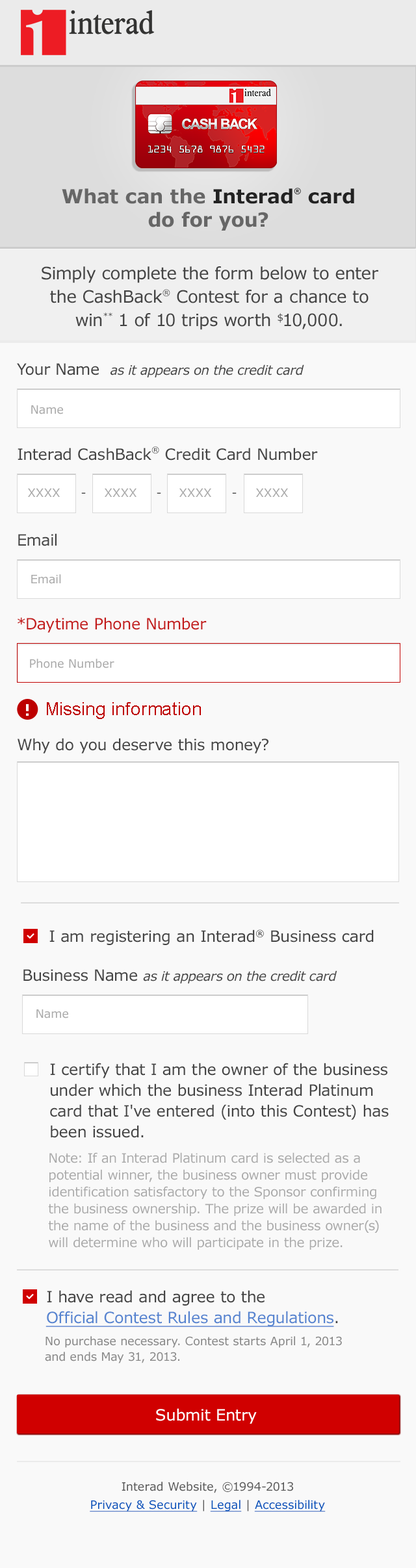
<style>
.page{position:relative;width:416px;height:1568px;background:#f9f9f9}
.page>*{position:absolute;margin:0}
.t1{font:19.5px/23.4px "Verdana-Bold";color:#666666}
.t2{font:19.5px/23.4px "Verdana-Bold";color:#222222}
.t3{font:13px/23.4px "Verdana-Bold";color:#222222}
.t4{font:16.9px/23.4px "Verdana";letter-spacing:-0.01em;color:#444444}
.t5{font:14.3px/23.4px "Verdana";letter-spacing:-0.01em;color:#444444}
.t6{font:13px "Verdana-Italic";letter-spacing:-0.025em;color:#444444}
.t7{font:15.6px "Verdana";letter-spacing:-0.01em;color:#444444}
.t8{font:11.7px "Verdana";letter-spacing:-0.005em;color:#aaaaaa}
.t9{font:14.3px "Verdana";letter-spacing:-0.01em;color:#444444}
.t10{font:11.7px "Verdana";letter-spacing:-0.005em;color:#444444}
.t11{font:15.6px "Verdana";letter-spacing:-0.01em;color:#c31b1b}
.t12{font:18.2px "ArialMT";color:#bd0000}
.t13{font:15.6px/20.8px "Verdana";letter-spacing:-0.01em;color:#444444}
.t14{font:13px/16.9px "Verdana";letter-spacing:-0.01em;color:#aaaaaa}
.t15{font:15.6px/20.8px "Verdana";letter-spacing:-0.01em;color:#5684d0;text-decoration:underline}
.t16{font:11.7px/15.6px "Verdana";letter-spacing:-0.01em;color:#888888}
.t17{font:15.6px "Verdana";letter-spacing:-0.01em;color:#ffffff}
.t18{font:11.7px/18.2px "Verdana";color:#595959}
.t19{font:11.7px/18.2px "Verdana";color:#0051bb;text-decoration:underline}
</style>
<div class="page">
<p class="t1" style="left:62px;top:188px;width:292px;height:43px;text-align:center">What can the<span class="t2"> Interad</span><span class="t3">®</span><span class="t2"> card <br></span>do for you?</p>
<p class="t4" style="left:42px;top:266px;width:336px;height:64px;text-align:center">Simply complete the form below to enter <br>the CashBack<span class="t5">®</span> Contest for a chance to <br>win<span class="t5">** </span>1 of 10 trips worth $10,000.</p>
<p class="t6" style="left:17px;top:363px;width:287px;height:14px"><span class="t7">Your Name  </span>as it appears on the credit card</p>
<p class="t8" style="left:31px;top:405px;width:32px;height:9px">Name</p>
<p class="t7" style="left:18px;top:446px;width:300px;height:15px">Interad CashBack<span class="t9">®</span> Credit Card Number</p>
<p class="t8" style="left:28px;top:488px;width:32px;height:9px">XXXX</p>
<p class="t10" style="left:81px;top:492px;width:5px;height:2px">-</p>
<p class="t8" style="left:105px;top:488px;width:31px;height:9px">XXXX</p>
<p class="t10" style="left:157px;top:492px;width:4px;height:2px">-</p>
<p class="t8" style="left:179px;top:488px;width:32px;height:9px">XXXX</p>
<p class="t10" style="left:232px;top:492px;width:4px;height:2px">-</p>
<p class="t8" style="left:256px;top:488px;width:32px;height:9px">XXXX</p>
<p class="t7" style="left:18px;top:533px;width:39px;height:13px">Email</p>
<p class="t8" style="left:31px;top:574px;width:30px;height:10px">Email</p>
<p class="t11" style="left:18px;top:617px;width:189px;height:16px">*Daytime Phone Number</p>
<p class="t8" style="left:30px;top:659px;width:84px;height:9px">Phone Number</p>
<p class="t12" style="left:47px;top:702px;width:154px;height:17px">Missing information</p>
<p class="t7" style="left:18px;top:738px;width:250px;height:15px">Why do you deserve this money?</p>
<p class="t7" style="left:49px;top:929px;width:324px;height:16px">I am registering an Interad® Business card</p>
<p class="t6" style="left:23px;top:969px;width:314px;height:14px"><span class="t7">Business Name </span>as it appears on the credit card</p>
<p class="t8" style="left:36px;top:1009px;width:32px;height:9px">Name</p>
<p class="t13" style="left:50px;top:1063px;width:338px;height:75px">I certify that I am the owner of the business under which the business Interad Platinum card that I've entered (into this Contest) has been issued.</p>
<p class="t14" style="left:48px;top:1152px;width:333px;height:98px">Note: If an Interad Platinum card is selected as a potential winner, the business owner must provide identification satisfactory to the Sponsor confirming the business ownership. The prize will be awarded in the name of the business and the business owner(s) will determine who will participate in the prize.</p>
<p class="t15" style="left:45px;top:1290px;width:293px;height:37px"><span class="t13">I have read and agree to the <br></span>Official Contest Rules and Regulations<span class="t13">.</span></p>
<p class="t16" style="left:45px;top:1336px;width:297px;height:27px">No purchase necessary. Contest starts April 1, 2013 <br>and ends May 31, 2013.</p>
<p class="t17" style="left:156px;top:1408px;width:101px;height:16px">Submit Entry</p>
<p class="t18" style="left:90px;top:1482px;width:235px;height:30px;text-align:center">Interad Website, ©1994-2013<br><span class="t19">Privacy &amp; Security</span> | <span class="t19">Legal</span> | <span class="t19">Accessibility</span></p>
</div>
